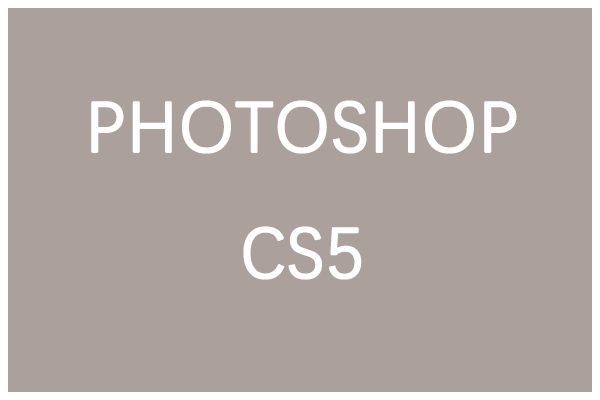
<style>
.page{position:relative;width:600px;height:400px;background:#aba09c}
.page>*{position:absolute;margin:0}
.t1{font:72px "DengXian";color:#ffffff;font-weight:bold}
</style>
<div class="page">
<p class="t1" style="left:91px;top:100px;width:426px;height:180px;text-align:center">PHOTOSHOP<br>CS5</p>
</div>
